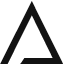
<style>
.page{position:relative;width:64px;height:64px;background:#ffffff}
.page>*{position:absolute;margin:0}
.t1{font:96px "EarthOrbiterTitle";color:#121212}
</style>
<div class="page">
<p class="t1" style="left:0px;top:1px;width:63px;height:63px">a</p>
</div>
